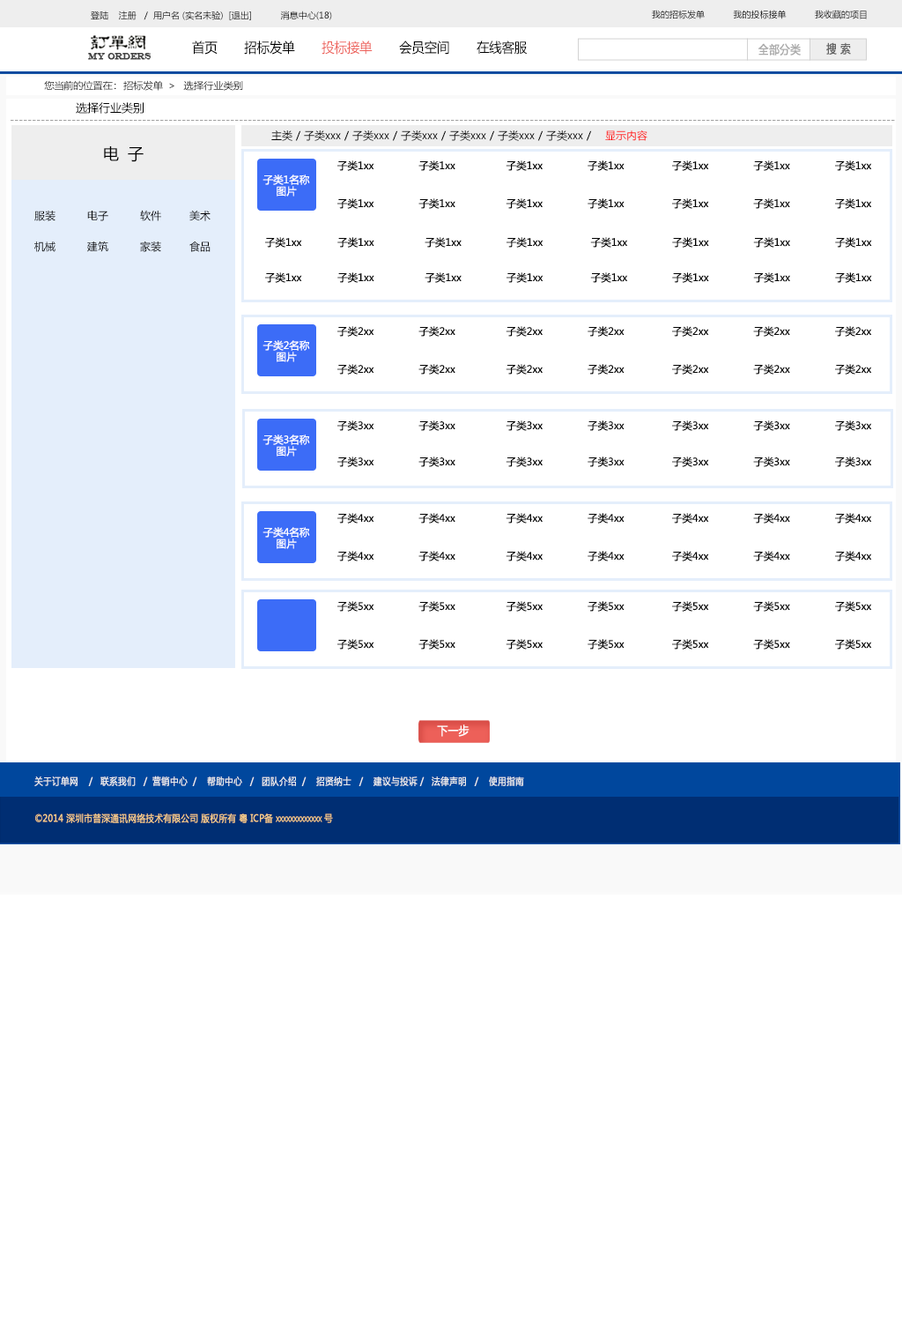
<style>
.page{position:relative;width:902px;height:1322px;background:#ffffff}
.page>*{position:absolute;margin:0}
.t1{font:8.8px "MicrosoftYaHei";color:#000000}
.t2{font:13.6px "MicrosoftYaHei";color:#000000;font-variant:small-caps;scale:0.94 1}
.t3{font:13.6px "MicrosoftYaHei";color:#ed6059;font-variant:small-caps;scale:0.94 1}
.t4{font:8.7px "EngraversMT";color:#434343;font-variant:small-caps;font-weight:bold;scale:0.86 1}
.t5{font:11.6px "MicrosoftYaHei";color:#aaaaaa;font-variant:small-caps;font-weight:bold;scale:0.86 1}
.t6{font:11.6px "MicrosoftYaHei";color:#626262;font-variant:small-caps;font-weight:bold;scale:0.86 1}
.t7{font:9.7px "MicrosoftYaHei";color:#060606;scale:1.04 1}
.t8{font:11.5px "MicrosoftYaHei";color:#000000}
.t9{font:10.6px "MicrosoftYaHei";color:#a0a0a0}
.t10{font:10.6px "MicrosoftYaHei";color:#000000}
.t11{font:15.9px "MicrosoftYaHei";color:#000000}
.t12{font:10.1px "MicrosoftYaHei";color:#000000}
.t13{font:10.1px/11.5px "MicrosoftYaHei";color:#ffffff}
.t14{font:11.6px "MicrosoftYaHei";color:#ffffff;font-variant:small-caps;font-weight:bold;scale:0.86 1}
.t15{font:9.7px "MicrosoftYaHei";color:#eeeeee;font-variant:small-caps;font-weight:bold;scale:0.86 1}
.t16{font:13.6px "STXihei";color:#eeeeee;font-variant:small-caps;font-weight:bold;scale:0.86 1}
.t17{font:9.7px "MicrosoftYaHei";color:#facd89;font-variant:small-caps;font-weight:bold;scale:0.87 1}
.t18{font:9.7px "MicrosoftYaHei";color:#eeeeee;font-variant:small-caps;font-weight:bold;scale:0.87 1}
</style>
<div class="page">
<p class="t1" style="left:91px;top:11px;width:241px;height:9px">登陆    注册   /  用户名 (实名未验)  [退出]           消息中心(18)</p>
<p class="t1" style="left:652px;top:10px;width:215px;height:9px">我的招标发单           我的投标接单           我收藏的项目</p>
<p class="t2" style="left:192px;top:41px;width:336px;height:14px">首页       招标发单      <span class="t3"> 投标接单 </span>      会员空间       在线客服</p>
<p class="t4" style="left:88px;top:53px;width:64px;height:7px">MY ORDERS</p>
<p class="t5" style="left:759px;top:43px;width:42px;height:13px">全部分类</p>
<p class="t6" style="left:826px;top:42px;width:25px;height:13px">搜 索</p>
<p class="t7" style="left:44px;top:80px;width:199px;height:11px">您当前的位置在：  招标发单  &gt;   选择行业类别</p>
<p class="t8" style="left:76px;top:102px;width:68px;height:12px">选择行业类别</p>
<p class="t9" style="left:11px;top:120px;width:884px;height:1px">---------------------------------------------------------------------------------------------------------------------------------------------------------------------------------------------------------</p>
<p class="t10" style="left:271px;top:130px;width:377px;height:11px">主类 / 子类xxx / 子类xxx / 子类xxx / 子类xxx / 子类xxx / 子类xxx /    显示内容</p>
<p class="t11" style="left:104px;top:146px;width:40px;height:16px">电  子</p>
<p class="t12" style="left:337px;top:160px;width:535px;height:11px">子类1xx               子类1xx                 子类1xx               子类1xx                子类1xx               子类1xx               子类1xx</p>
<p class="t13" style="left:263px;top:174px;width:47px;height:22px;text-align:center">子类1名称<br>图片</p>
<p class="t10" style="left:34px;top:210px;width:177px;height:11px">服装         电子         软件        美术</p>
<p class="t12" style="left:337px;top:198px;width:535px;height:11px">子类1xx               子类1xx                 子类1xx               子类1xx                子类1xx               子类1xx               子类1xx</p>
<p class="t10" style="left:34px;top:241px;width:177px;height:11px">机械         建筑         家装        食品</p>
<p class="t12" style="left:265px;top:237px;width:607px;height:11px">子类1xx            子类1xx                 子类1xx               子类1xx                子类1xx               子类1xx               子类1xx               子类1xx</p>
<p class="t12" style="left:265px;top:272px;width:607px;height:11px">子类1xx            子类1xx                 子类1xx               子类1xx                子类1xx               子类1xx               子类1xx               子类1xx</p>
<p class="t12" style="left:337px;top:326px;width:535px;height:11px">子类2xx               子类2xx                 子类2xx               子类2xx                子类2xx               子类2xx               子类2xx</p>
<p class="t13" style="left:263px;top:340px;width:47px;height:22px;text-align:center">子类2名称<br>图片</p>
<p class="t12" style="left:337px;top:364px;width:535px;height:10px">子类2xx               子类2xx                 子类2xx               子类2xx                子类2xx               子类2xx               子类2xx</p>
<p class="t12" style="left:337px;top:420px;width:535px;height:11px">子类3xx               子类3xx                 子类3xx               子类3xx                子类3xx               子类3xx               子类3xx</p>
<p class="t13" style="left:263px;top:434px;width:47px;height:22px;text-align:center">子类3名称<br>图片</p>
<p class="t12" style="left:337px;top:456px;width:535px;height:11px">子类3xx               子类3xx                 子类3xx               子类3xx                子类3xx               子类3xx               子类3xx</p>
<p class="t12" style="left:337px;top:513px;width:535px;height:10px">子类4xx               子类4xx                 子类4xx               子类4xx                子类4xx               子类4xx               子类4xx</p>
<p class="t13" style="left:263px;top:527px;width:47px;height:22px;text-align:center">子类4名称<br>图片</p>
<p class="t12" style="left:337px;top:551px;width:535px;height:10px">子类4xx               子类4xx                 子类4xx               子类4xx                子类4xx               子类4xx               子类4xx</p>
<p class="t12" style="left:337px;top:601px;width:535px;height:10px">子类5xx               子类5xx                 子类5xx               子类5xx                子类5xx               子类5xx               子类5xx</p>
<p class="t12" style="left:337px;top:639px;width:535px;height:10px">子类5xx               子类5xx                 子类5xx               子类5xx                子类5xx               子类5xx               子类5xx</p>
<p class="t14" style="left:437px;top:724px;width:33px;height:13px">下一步</p>
<p class="t15" style="left:34px;top:775px;width:490px;height:11px"><span class="t16"><br><br></span>关于订单网    /   联系我们   /  营销中心  /    帮助中心   /   团队介绍  /    招贤纳士   /    建议与投诉 /   法律声明   /    使用指南</p>
<p class="t17" style="left:35px;top:813px;width:298px;height:10px"><span class="t18"> </span>©2014 深圳市普深通讯网络技术有限公司 版权所有 粤 ICP备 xxxxxxxxxxxxx 号</p>
</div>
